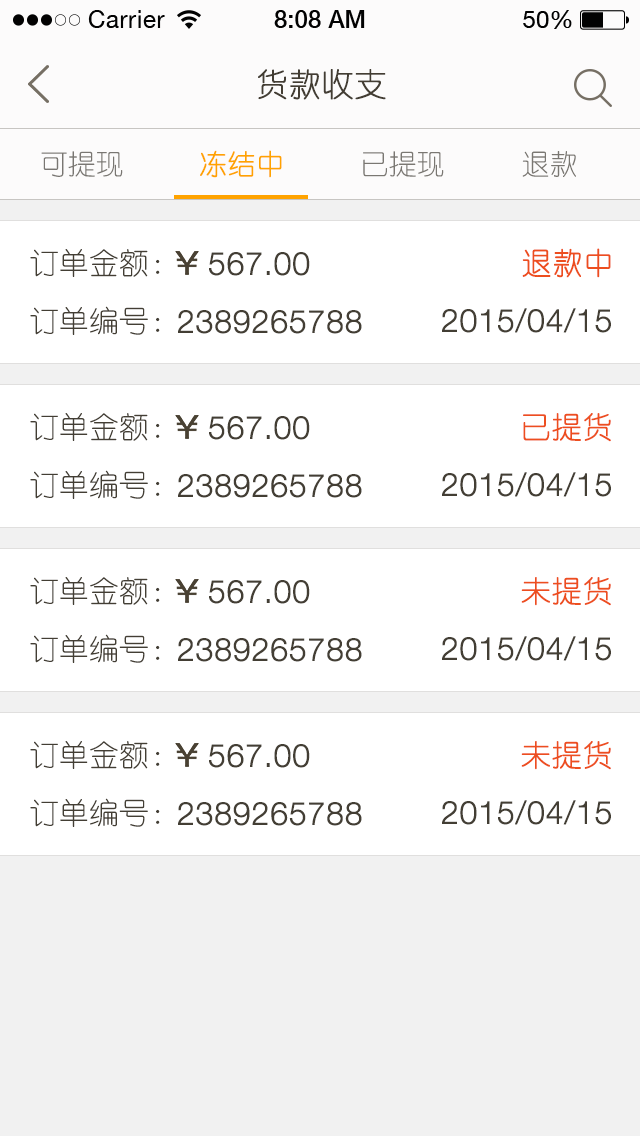
<style>
.page{position:relative;width:640px;height:1136px;background:#ffffff}
.page>*{position:absolute;margin:0}
.t1{font:32px "YouYuan";color:#433d33;text-transform:uppercase;font-weight:bold}
.t2{font:28px "YouYuan";color:#ffa300;text-transform:uppercase;font-weight:bold}
.t3{font:28px "YouYuan";color:#797672;text-transform:uppercase}
.t4{font:28px "YouYuan";color:#7a7772;text-transform:uppercase}
.t5{font:30px "YouYuan";color:#433e34;text-transform:uppercase}
.t6{font:32px "HelveticaNeueLTPro-Lt";color:#433e34;text-transform:uppercase;font-weight:bold}
.t7{font:30px "YouYuan";color:#ed4e1f;text-transform:uppercase;font-weight:bold}
</style>
<div class="page">
<p class="t1" style="left:258px;top:69px;width:128px;height:31px">货款收支</p>
<p class="t2" style="left:200px;top:150px;width:82px;height:28px">冻结中</p>
<p class="t3" style="left:41px;top:151px;width:82px;height:26px">可提现</p>
<p class="t4" style="left:363px;top:151px;width:81px;height:26px">已提现</p>
<p class="t4" style="left:522px;top:151px;width:54px;height:26px">退款</p>
<p class="t5" style="left:30px;top:249px;width:130px;height:28px">订单金额：</p>
<p class="t6" style="left:209px;top:252px;width:101px;height:24px">567.00</p>
<p class="t7" style="left:522px;top:248px;width:89px;height:30px">退款中</p>
<p class="t5" style="left:30px;top:306px;width:130px;height:29px">订单编号：</p>
<p class="t6" style="left:178px;top:310px;width:184px;height:24px">2389265788</p>
<p class="t6" style="left:442px;top:308px;width:169px;height:25px">2015/04/15</p>
<p class="t5" style="left:30px;top:413px;width:130px;height:28px">订单金额：</p>
<p class="t7" style="left:523px;top:413px;width:88px;height:29px">已提货</p>
<p class="t6" style="left:209px;top:416px;width:101px;height:24px">567.00</p>
<p class="t5" style="left:30px;top:470px;width:130px;height:29px">订单编号：</p>
<p class="t6" style="left:442px;top:472px;width:169px;height:25px">2015/04/15</p>
<p class="t6" style="left:178px;top:474px;width:184px;height:24px">2389265788</p>
<p class="t5" style="left:30px;top:577px;width:130px;height:28px">订单金额：</p>
<p class="t6" style="left:209px;top:580px;width:101px;height:24px">567.00</p>
<p class="t7" style="left:521px;top:577px;width:90px;height:29px">未提货</p>
<p class="t5" style="left:30px;top:634px;width:130px;height:29px">订单编号：</p>
<p class="t6" style="left:178px;top:638px;width:184px;height:24px">2389265788</p>
<p class="t6" style="left:442px;top:636px;width:169px;height:25px">2015/04/15</p>
<p class="t5" style="left:30px;top:741px;width:130px;height:28px">订单金额：</p>
<p class="t6" style="left:209px;top:744px;width:101px;height:24px">567.00</p>
<p class="t7" style="left:521px;top:741px;width:90px;height:29px">未提货</p>
<p class="t5" style="left:30px;top:798px;width:130px;height:29px">订单编号：</p>
<p class="t6" style="left:178px;top:802px;width:184px;height:24px">2389265788</p>
<p class="t6" style="left:442px;top:800px;width:169px;height:25px">2015/04/15</p>
</div>
